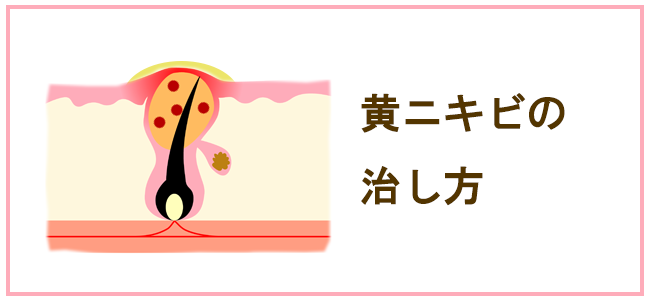
<style>
.page{position:relative;width:650px;height:300px;background:#ffffff}
.page>*{position:absolute;margin:0}
.t1{font:41.7px "HGGothicE";color:#533500}
</style>
<div class="page">
<p class="t1" style="left:361px;top:93px;width:204px;height:113px">黄ニキビの<br>治し方</p>
</div>
